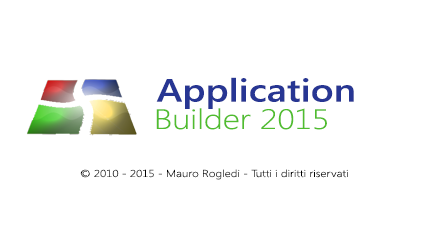
<style>
.page{position:relative;width:425px;height:225px;background:#ffffff}
.page>*{position:absolute;margin:0}
.t1{font:32px "SegoeUI-SemiBold";color:#273693;scale:1.2 1}
.t2{font:28px "SegoeUI-Light";color:#50bd2e;scale:1.2 1}
.t3{font:10px "SegoeUI-Light";color:#000000;scale:1.2 1}
</style>
<div class="page">
<p class="t1" style="left:156px;top:77px;width:198px;height:32px">Application</p>
<p class="t2" style="left:156px;top:108px;width:171px;height:22px">Builder 2015</p>
<p class="t3" style="left:80px;top:169px;width:268px;height:11px">© 2010 - 2015 - Mauro Rogledi - Tutti i diritti riservati</p>
</div>
